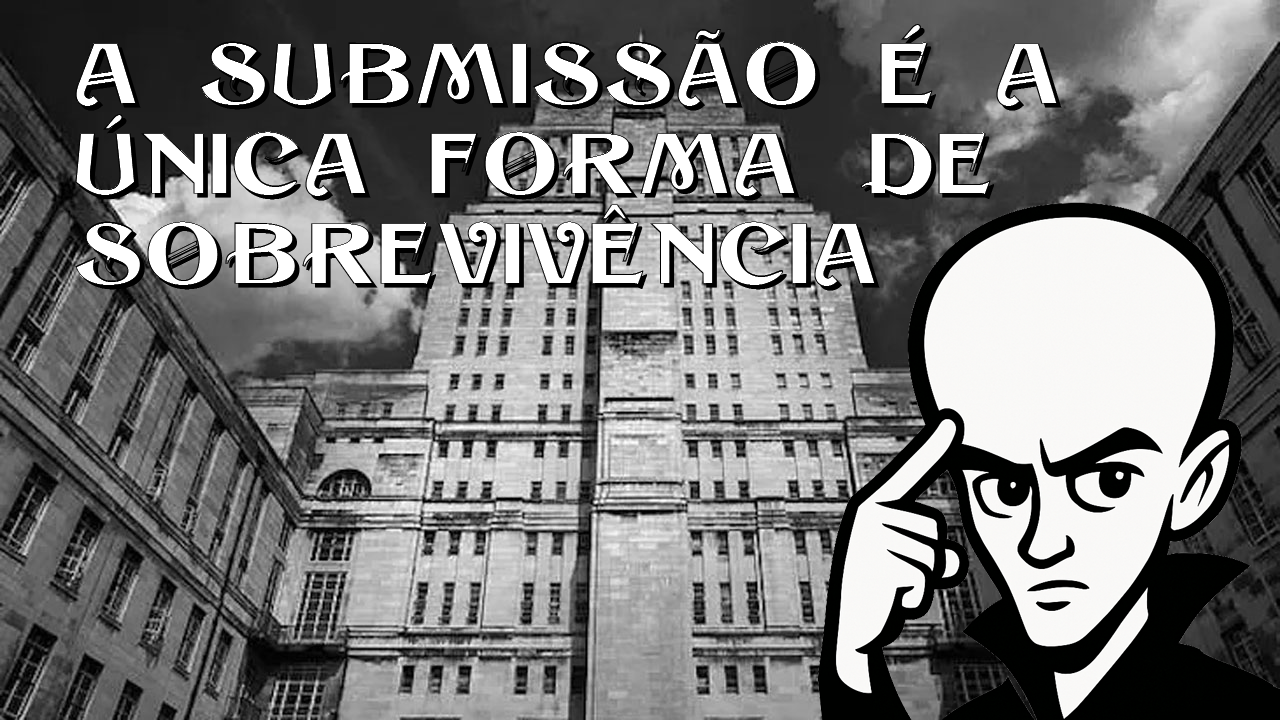
<style>
.page{position:relative;width:1280px;height:720px}
.page>*{position:absolute;margin:0}
.t1{font:75px "Sesame-Shadow";color:#000000}
</style>
<div class="page">
<p class="t1" style="left:75px;top:24px;width:987px;height:267px">A SUBMISSÃO É A<br>ÚNICA FORMA DE<br>SOBREVIVÊNCIA</p>
</div>
